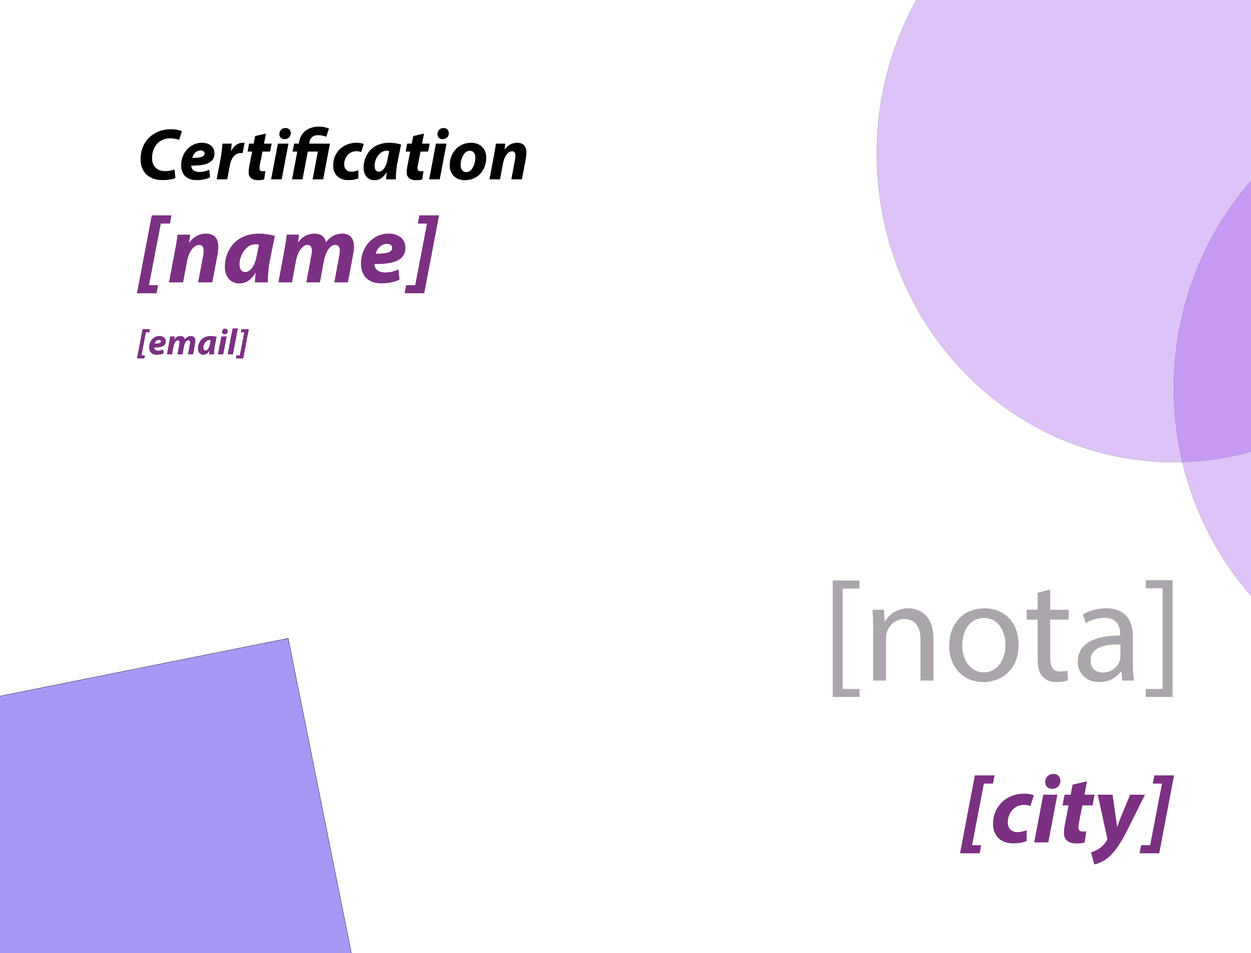
<style>
.page{position:relative;width:1251px;height:953px;background:#ffffff}
.page>*{position:absolute;margin:0}
.t1{font:73.2px "MyriadPro-BoldIt";color:#000000}
.t2{font:97.6px "MyriadPro-BoldIt";color:#7c3083}
.t3{font:36.6px "MyriadPro-BoldIt";color:#7c3083}
.t4{font:146.3px "MyriadPro-Regular";color:#aba6ab}
</style>
<div class="page">
<p class="t1" style="left:140px;top:126px;width:387px;height:54px">Certification</p>
<p class="t2" style="left:137px;top:215px;width:302px;height:79px">[name]</p>
<p class="t3" style="left:137px;top:328px;width:112px;height:31px">[email]</p>
<p class="t4" style="left:833px;top:580px;width:339px;height:117px">[nota]</p>
<p class="t2" style="left:960px;top:774px;width:214px;height:91px">[city]</p>
</div>
